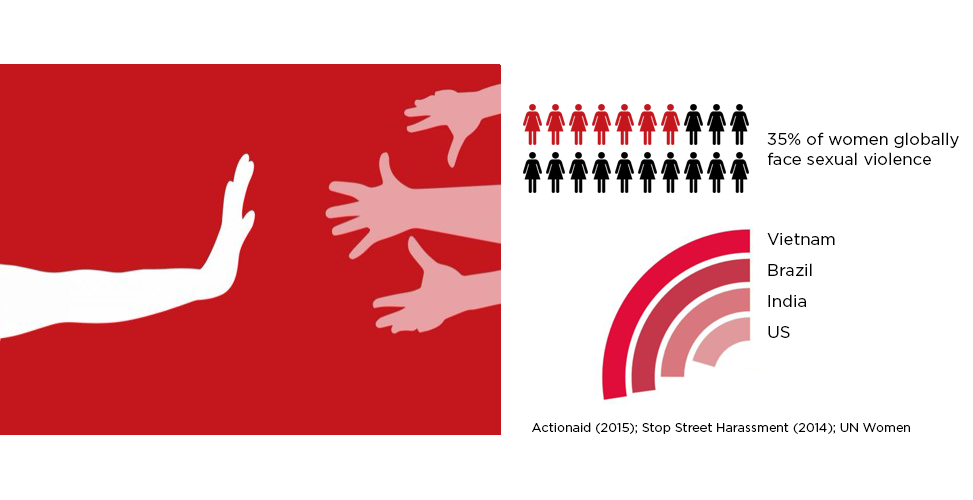
<style>
.page{position:relative;width:973px;height:500px;background:#ffffff}
.page>*{position:absolute;margin:0}
.t1{font:16.7px "Gotham-Book";color:#000000}
.t2{font:12.5px "Gotham-Book";color:#000000}
</style>
<div class="page">
<p class="t1" style="left:767px;top:132px;width:192px;height:33px;text-align:right">35% of women globally face sexual violence</p>
<p class="t1" style="left:767px;top:233px;width:68px;height:12px">Vietnam</p>
<p class="t1" style="left:768px;top:263px;width:44px;height:13px">Brazil</p>
<p class="t1" style="left:768px;top:294px;width:38px;height:13px">India</p>
<p class="t1" style="left:768px;top:326px;width:22px;height:12px">US</p>
<p class="t2" style="left:532px;top:422px;width:378px;height:12px">Actionaid (2015); Stop Street Harassment (2014); UN Women</p>
</div>
